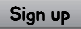
<style>
.page{position:relative;width:81px;height:29px}
.page>*{position:absolute;margin:0}
.t1{font:20px "BMJUA";color:#000000}
</style>
<div class="page">
<p class="t1" style="left:10px;top:6px;width:60px;height:19px">Sign up</p>
</div>
